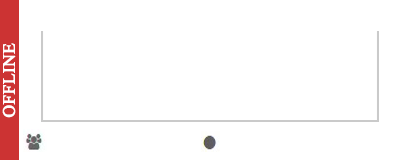
<style>
.page{position:relative;width:400px;height:160px;background:#ffffff}
.page>*{position:absolute;margin:0}
.t1{font:17.2px "TimesNewRomanPSMT";color:#ffffff;text-transform:uppercase;font-weight:bold}
</style>
<div class="page">
<p class="t1" style="left:2px;top:43px;width:14px;height:75px;rotate:-90deg">Offline</p>
</div>
